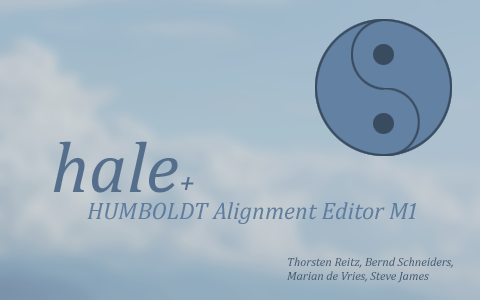
<style>
.page{position:relative;width:480px;height:300px}
.page>*{position:absolute;margin:0}
.t1{font:72px "Cambria-Italic";color:#546e8b}
.t2{font:30px "Cambria-Italic";color:#546e8b}
.t3{font:24px "Cambria-Italic";color:#5f7d9e}
.t4{font:12px "Cambria-Italic";color:#455b73}
</style>
<div class="page">
<p class="t1" style="left:53px;top:141px;width:141px;height:52px">hale<span class="t2">+</span></p>
<p class="t3" style="left:87px;top:202px;width:329px;height:22px">HUMBOLDT Alignment Editor M1</p>
<p class="t4" style="left:287px;top:257px;width:166px;height:26px">Thorsten Reitz, Bernd Schneiders, <br>Marian de Vries, Steve James</p>
</div>
